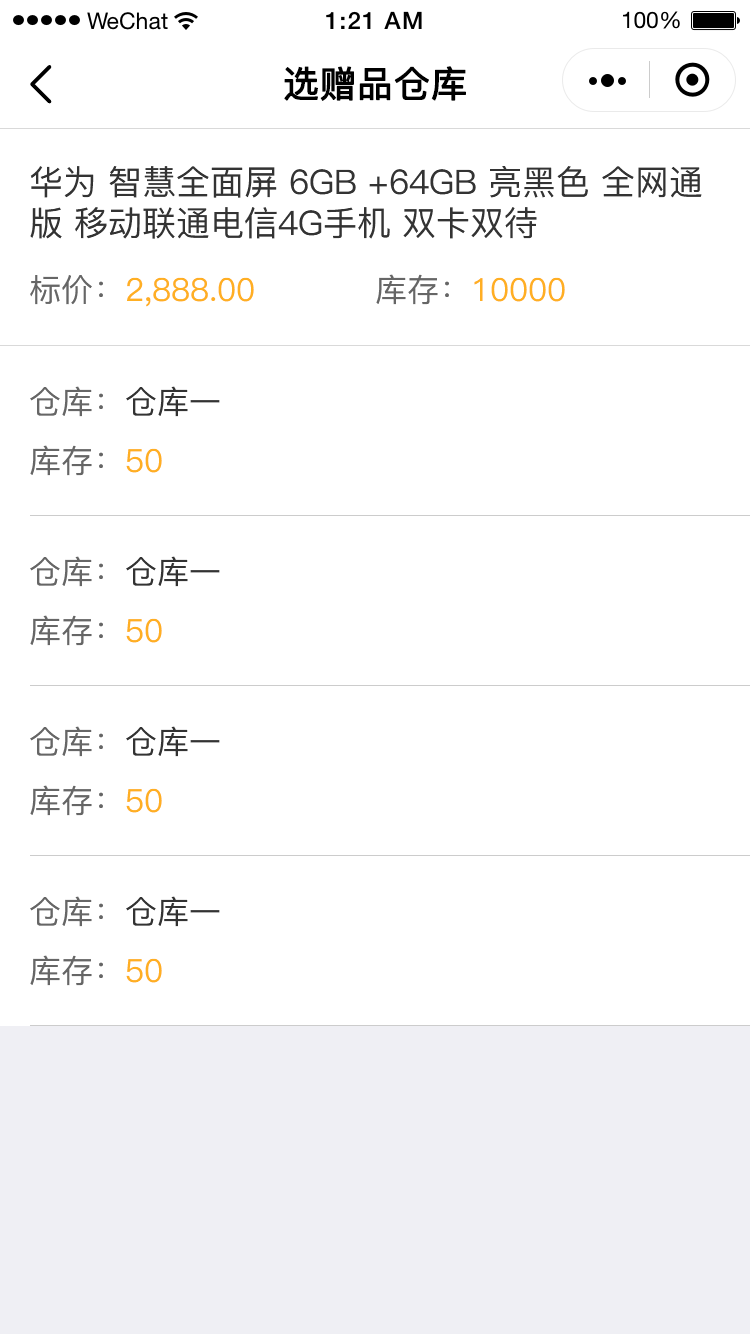
<style>
.page{position:relative;width:750px;height:1334px;background:#ffffff}
.page>*{position:absolute;margin:0}
.t1{font:36px "PingFang-SC-Medium";color:#000000;font-weight:bold}
.t2{font:34px "PingFang-SC-Medium";color:#333333}
.t3{font:32px "PingFang-SC-Medium";color:#ffaf23}
.t4{font:32px "PingFang-SC-Medium";color:#666666}
.t5{font:32px "PingFang-SC-Medium";color:#333333}
</style>
<div class="page">
<p class="t1" style="left:284px;top:66px;width:182px;height:35px">选赠品仓库</p>
<p class="t2" style="left:30px;top:166px;width:672px;height:73px">华为 智慧全面屏 6GB +64GB 亮黑色 全网通版 移动联通电信4G手机 双卡双待</p>
<p class="t3" style="left:30px;top:275px;width:224px;height:32px"><span class="t4">标价：</span>2,888.00</p>
<p class="t3" style="left:376px;top:274px;width:189px;height:31px"><span class="t4">库存：</span>10000</p>
<p class="t4" style="left:30px;top:386px;width:190px;height:31px">仓库：<span class="t5">仓库一</span></p>
<p class="t4" style="left:30px;top:445px;width:132px;height:31px">库存：<span class="t3">50</span></p>
<p class="t4" style="left:30px;top:556px;width:190px;height:31px">仓库：<span class="t5">仓库一</span></p>
<p class="t4" style="left:30px;top:615px;width:132px;height:31px">库存：<span class="t3">50</span></p>
<p class="t4" style="left:30px;top:726px;width:190px;height:31px">仓库：<span class="t5">仓库一</span></p>
<p class="t4" style="left:30px;top:785px;width:132px;height:31px">库存：<span class="t3">50</span></p>
<p class="t4" style="left:30px;top:896px;width:190px;height:31px">仓库：<span class="t5">仓库一</span></p>
<p class="t4" style="left:30px;top:955px;width:132px;height:31px">库存：<span class="t3">50</span></p>
</div>
